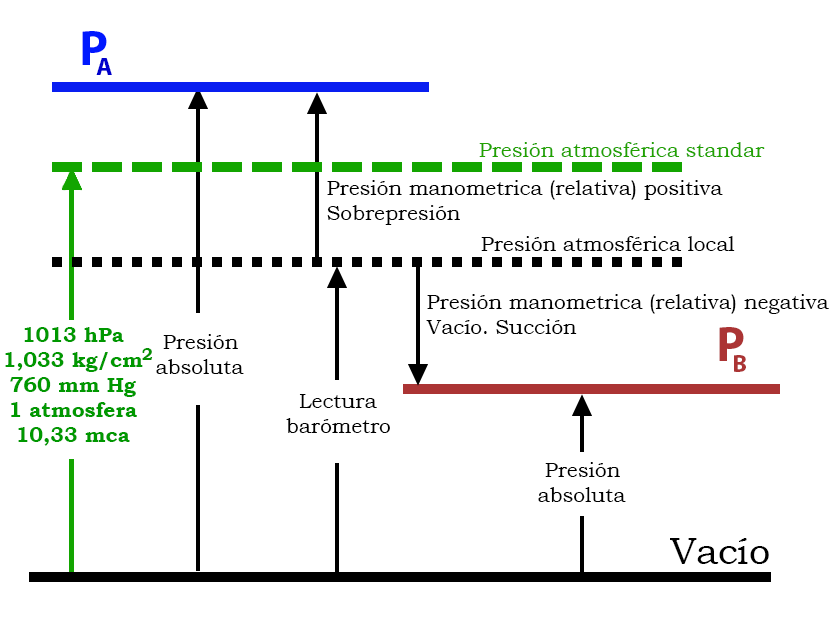
<style>
.page{position:relative;width:838px;height:622px;background:#ffffff}
.page>*{position:absolute;margin:0}
.t1{font:50px "MyriadPro-Bold";color:#0018ff}
.t2{font:25px "MyriadPro-Bold";color:#0000cc}
.t3{font:20.8px "BookmanOldStyle";color:#22a200}
.t4{font:20.8px "BookmanOldStyle";color:#000000}
.t5{font:20.8px "BookmanOldStyle-Bold";color:#009800}
.t6{font:50px "MyriadPro-Bold";color:#ab3434}
.t7{font:16.7px "BookmanOldStyle-Bold";color:#049101}
.t8{font:25px "MyriadPro-Bold";color:#ab3434}
.t9{font:37.5px "BookmanOldStyle";color:#000000}
</style>
<div class="page">
<p class="t1" style="left:82px;top:31px;width:25px;height:34px">P</p>
<p class="t2" style="left:96px;top:58px;width:16px;height:17px">A</p>
<p class="t3" style="left:479px;top:142px;width:286px;height:15px">Presión atmosférica standar</p>
<p class="t4" style="left:327px;top:180px;width:396px;height:45px">Presión manometrica (relativa) positiva<br>Sobrepresión</p>
<p class="t4" style="left:481px;top:236px;width:254px;height:15px">Presión atmosférica local</p>
<p class="t4" style="left:426px;top:294px;width:403px;height:40px">Presión manometrica (relativa) negativa<br>Vacío. Succión</p>
<p class="t5" style="left:5px;top:327px;width:138px;height:119px;text-align:center">1013 hPa<br>1,033 kg/cm<br>760 mm Hg<br>1 atmosfera<br>10,33 mca</p>
<p class="t6" style="left:719px;top:327px;width:25px;height:34px">P</p>
<p class="t4" style="left:156px;top:334px;width:88px;height:40px">Presión <br>           absoluta</p>
<p class="t7" style="left:142px;top:348px;width:11px;height:12px">2</p>
<p class="t8" style="left:734px;top:355px;width:12px;height:17px">B</p>
<p class="t4" style="left:286px;top:394px;width:104px;height:39px">Lectura<br>barómetro</p>
<p class="t4" style="left:538px;top:462px;width:88px;height:40px">Presión <br>           absoluta</p>
<p class="t9" style="left:670px;top:538px;width:99px;height:26px">Vacío</p>
</div>
